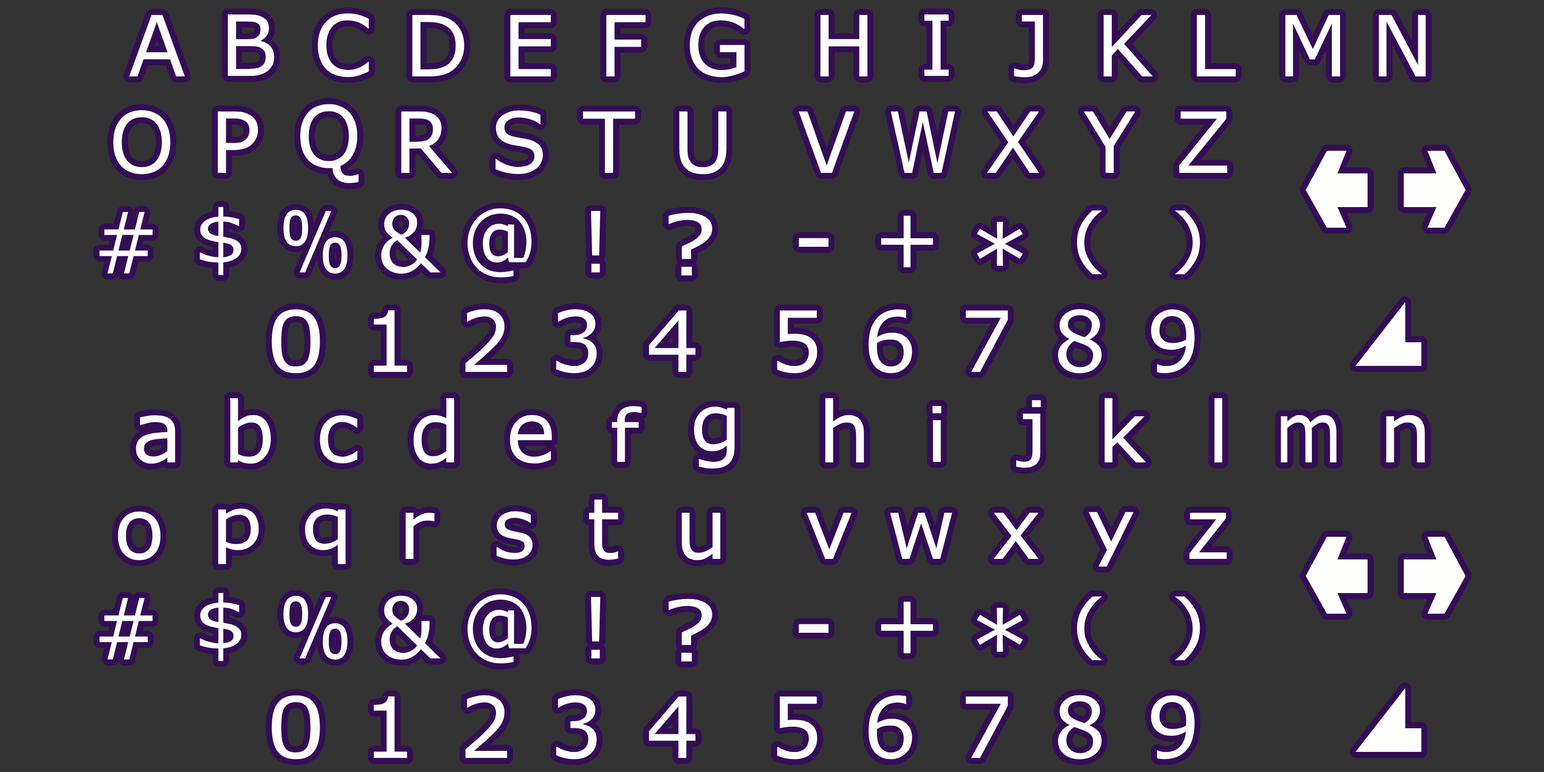
<style>
.page{position:relative;width:1544px;height:772px;background:#333333}
.page>*{position:absolute;margin:0}
.t1{font:84.5px "Verdana";letter-spacing:-0.065em;color:#fefefd}
.t2{font:84.5px "Verdana";letter-spacing:-0.065em;color:#fefefd;scale:0.85 1}
.t3{font:71.9px "Verdana";letter-spacing:-0.065em;color:#fefefd;scale:1.17 1}
.t4{font:84.5px "Verdana";letter-spacing:-0.065em;color:#fefefd;scale:0.81 1}
.t5{font:81.1px "Verdana";letter-spacing:-0.065em;color:#fefefd;scale:0.95 1}
.t6{font:84.5px "Verdana";letter-spacing:-0.065em;color:#fefefd;scale:1.25 1}
.t7{font:96.9px "Verdana";letter-spacing:-0.065em;color:#fefefd}
.t8{font:66.4px "Verdana";letter-spacing:-0.065em;color:#fefefd;scale:1.27 1}
.t9{font:97.3px "Verdana";letter-spacing:-0.065em;color:#fefefd}
.t10{font:84.5px "Verdana";letter-spacing:-0.065em;color:#fefefd;scale:1.13 1}
.t11{font:72.9px "Verdana";letter-spacing:-0.065em;color:#fefefd;scale:1.16 1}
.t12{font:80.6px "Verdana";letter-spacing:-0.065em;color:#fefefd;scale:1.05 1}
.t13{font:76.4px "Verdana";letter-spacing:-0.065em;color:#fefefd;scale:1.11 1}
.t14{font:84.5px "Verdana";letter-spacing:-0.065em;color:#fefefd;scale:0.83 1}
</style>
<div class="page">
<p class="t1" style="left:129px;top:15px;width:56px;height:61px">A</p>
<p class="t1" style="left:228px;top:14px;width:46px;height:62px">B</p>
<p class="t1" style="left:318px;top:13px;width:51px;height:64px">C</p>
<p class="t1" style="left:412px;top:15px;width:52px;height:61px">D</p>
<p class="t1" style="left:510px;top:15px;width:41px;height:61px">E</p>
<p class="t1" style="left:606px;top:15px;width:40px;height:61px">F</p>
<p class="t1" style="left:690px;top:13px;width:55px;height:64px">G</p>
<p class="t1" style="left:820px;top:15px;width:48px;height:61px">H</p>
<p class="t1" style="left:924px;top:14px;width:25px;height:62px">I</p>
<p class="t1" style="left:1014px;top:15px;width:30px;height:62px">J</p>
<p class="t1" style="left:1103px;top:15px;width:50px;height:61px">K</p>
<p class="t1" style="left:1197px;top:15px;width:39px;height:61px">L</p>
<p class="t1" style="left:1285px;top:15px;width:56px;height:61px">M</p>
<p class="t1" style="left:1379px;top:15px;width:47px;height:61px">N</p>
<p class="t1" style="left:113px;top:110px;width:57px;height:64px">O</p>
<p class="t1" style="left:218px;top:111px;width:40px;height:62px">P</p>
<p class="t1" style="left:300px;top:104px;width:59px;height:79px">Q</p>
<p class="t1" style="left:401px;top:111px;width:51px;height:62px">R</p>
<p class="t1" style="left:495px;top:110px;width:48px;height:64px">S</p>
<p class="t1" style="left:583px;top:111px;width:52px;height:62px">T</p>
<p class="t1" style="left:679px;top:111px;width:48px;height:63px">U</p>
<p class="t1" style="left:799px;top:111px;width:56px;height:62px">V</p>
<p class="t2" style="left:891px;top:111px;width:65px;height:62px">W</p>
<p class="t1" style="left:987px;top:111px;width:53px;height:62px">X</p>
<p class="t1" style="left:1084px;top:111px;width:52px;height:62px">Y</p>
<p class="t1" style="left:1179px;top:111px;width:49px;height:62px">Z</p>
<p class="t3" style="left:200px;top:207px;width:42px;height:68px">$</p>
<p class="t4" style="left:283px;top:210px;width:65px;height:64px">%</p>
<p class="t1" style="left:381px;top:210px;width:60px;height:64px">&amp;</p>
<p class="t5" style="left:468px;top:208px;width:64px;height:69px">@</p>
<p class="t1" style="left:99px;top:212px;width:54px;height:61px">#</p>
<p class="t1" style="left:591px;top:211px;width:10px;height:61px">!</p>
<p class="t6" style="left:669px;top:213px;width:44px;height:62px">?</p>
<p class="t1" style="left:881px;top:216px;width:53px;height:51px">+</p>
<p class="t7" style="left:977px;top:222px;width:47px;height:44px">*</p>
<p class="t8" style="left:1077px;top:210px;width:25px;height:64px">(</p>
<p class="t8" style="left:1175px;top:210px;width:25px;height:64px">)</p>
<p class="t9" style="left:799px;top:238px;width:30px;height:9px">-</p>
<p class="t10" style="left:271px;top:309px;width:49px;height:65px">0</p>
<p class="t1" style="left:374px;top:310px;width:33px;height:62px">1</p>
<p class="t1" style="left:466px;top:309px;width:41px;height:63px">2</p>
<p class="t1" style="left:556px;top:309px;width:41px;height:65px">3</p>
<p class="t1" style="left:649px;top:310px;width:47px;height:62px">4</p>
<p class="t1" style="left:777px;top:310px;width:40px;height:64px">5</p>
<p class="t1" style="left:869px;top:309px;width:43px;height:65px">6</p>
<p class="t1" style="left:966px;top:310px;width:42px;height:62px">7</p>
<p class="t1" style="left:1058px;top:309px;width:44px;height:65px">8</p>
<p class="t1" style="left:1151px;top:309px;width:44px;height:65px">9</p>
<p class="t1" style="left:230px;top:398px;width:41px;height:66px">b</p>
<p class="t1" style="left:413px;top:398px;width:41px;height:66px">d</p>
<p class="t1" style="left:825px;top:398px;width:39px;height:64px">h</p>
<p class="t3" style="left:1016px;top:400px;width:25px;height:68px">j</p>
<p class="t1" style="left:1104px;top:398px;width:43px;height:64px">k</p>
<p class="t1" style="left:1215px;top:398px;width:8px;height:64px">l</p>
<p class="t11" style="left:612px;top:406px;width:30px;height:56px">f</p>
<p class="t12" style="left:694px;top:407px;width:41px;height:62px">g</p>
<p class="t13" style="left:933px;top:406px;width:9px;height:56px">i</p>
<p class="t1" style="left:136px;top:415px;width:39px;height:49px">a</p>
<p class="t1" style="left:320px;top:415px;width:37px;height:49px">c</p>
<p class="t1" style="left:510px;top:415px;width:42px;height:49px">e</p>
<p class="t14" style="left:1281px;top:415px;width:56px;height:47px">m</p>
<p class="t1" style="left:1386px;top:415px;width:39px;height:47px">n</p>
<p class="t11" style="left:218px;top:508px;width:41px;height:57px">p</p>
<p class="t11" style="left:305px;top:508px;width:41px;height:57px">q</p>
<p class="t1" style="left:589px;top:500px;width:29px;height:60px">t</p>
<p class="t1" style="left:118px;top:511px;width:43px;height:50px">o</p>
<p class="t1" style="left:406px;top:513px;width:29px;height:46px">r</p>
<p class="t1" style="left:497px;top:511px;width:36px;height:49px">s</p>
<p class="t1" style="left:682px;top:513px;width:39px;height:48px">u</p>
<p class="t1" style="left:807px;top:513px;width:45px;height:46px">v</p>
<p class="t1" style="left:890px;top:513px;width:63px;height:46px">w</p>
<p class="t1" style="left:993px;top:513px;width:46px;height:46px">x</p>
<p class="t11" style="left:1089px;top:512px;width:45px;height:55px">y</p>
<p class="t1" style="left:1189px;top:513px;width:38px;height:46px">z</p>
<p class="t3" style="left:200px;top:593px;width:42px;height:69px">$</p>
<p class="t1" style="left:99px;top:598px;width:54px;height:62px">#</p>
<p class="t4" style="left:283px;top:596px;width:65px;height:64px">%</p>
<p class="t1" style="left:381px;top:596px;width:60px;height:64px">&amp;</p>
<p class="t5" style="left:468px;top:594px;width:64px;height:70px">@</p>
<p class="t1" style="left:591px;top:597px;width:10px;height:62px">!</p>
<p class="t6" style="left:669px;top:599px;width:44px;height:63px">?</p>
<p class="t1" style="left:881px;top:602px;width:53px;height:52px">+</p>
<p class="t8" style="left:1077px;top:596px;width:25px;height:65px">(</p>
<p class="t8" style="left:1175px;top:596px;width:25px;height:65px">)</p>
<p class="t7" style="left:977px;top:608px;width:47px;height:44px">*</p>
<p class="t9" style="left:799px;top:624px;width:30px;height:9px">-</p>
<p class="t10" style="left:271px;top:695px;width:49px;height:65px">0</p>
<p class="t1" style="left:374px;top:696px;width:33px;height:62px">1</p>
<p class="t1" style="left:466px;top:695px;width:41px;height:63px">2</p>
<p class="t1" style="left:556px;top:695px;width:41px;height:65px">3</p>
<p class="t1" style="left:649px;top:696px;width:47px;height:62px">4</p>
<p class="t1" style="left:777px;top:696px;width:40px;height:64px">5</p>
<p class="t1" style="left:869px;top:695px;width:43px;height:65px">6</p>
<p class="t1" style="left:966px;top:696px;width:42px;height:62px">7</p>
<p class="t1" style="left:1058px;top:695px;width:44px;height:65px">8</p>
<p class="t1" style="left:1151px;top:695px;width:44px;height:65px">9</p>
</div>
